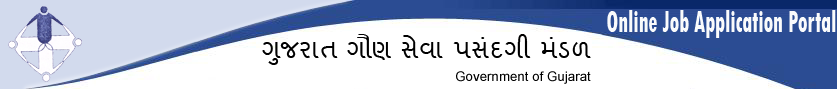
<style>
.page{position:relative;width:837px;height:89px;background:#ffffff}
.page>*{position:absolute;margin:0}
.t1{font:32px "TwCenMT-CondensedExtraBold";color:#fafbfc;scale:0.65 1}
.t2{font:24px "Shruti";color:#000000}
.t3{font:13.3px "ArialMT";color:#000000}
</style>
<div class="page">
<p class="t1" style="left:607px;top:10px;width:229px;height:28px">Online Job Application Portal</p>
<p class="t2" style="left:262px;top:34px;width:329px;height:31px">ગુજરાત ગૌણ સેવા પસંદગી મંડળ</p>
<p class="t3" style="left:456px;top:71px;width:135px;height:13px">Government of Gujarat</p>
</div>
